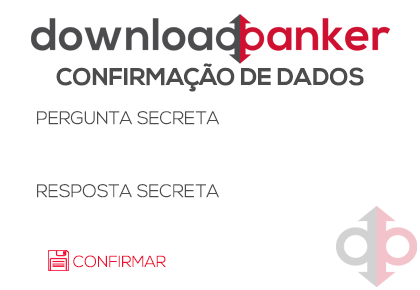
<style>
.page{position:relative;width:420px;height:290px;background:#ffffff}
.page>*{position:absolute;margin:0}
.t1{font:24px "NexaBold";color:#4c4c4c}
.t2{font:18px "NexaLight";color:#4c4c4c}
.t3{font:16px "NexaLight";color:#f0082e}
</style>
<div class="page">
<p class="t1" style="left:56px;top:63px;width:308px;height:29px">CONFIRMAÇÃO DE DADOS</p>
<p class="t2" style="left:37px;top:111px;width:182px;height:14px">PERGUNTA SECRETA</p>
<p class="t2" style="left:37px;top:184px;width:182px;height:14px">RESPOSTA SECRETA</p>
<p class="t3" style="left:73px;top:255px;width:93px;height:13px">CONFIRMAR</p>
</div>
